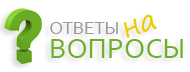
<style>
.page{position:relative;width:190px;height:72px;background:#ffffff}
.page>*{position:absolute;margin:0}
.t1{font:29.3px "SegoePrint";color:#ebcd00}
.t2{font:18.7px "Corbel";color:#9a9a9a}
.t3{font:29.3px "Corbel";color:#70ae2f}
</style>
<div class="page">
<p class="t1" style="left:123px;top:14px;width:34px;height:24px;rotate:-19deg">на</p>
<p class="t2" style="left:50px;top:22px;width:68px;height:12px">ОТВЕТЫ</p>
<p class="t3" style="left:51px;top:39px;width:132px;height:19px">ВОПРОСЫ</p>
</div>
